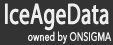
<style>
.page{position:relative;width:113px;height:45px;background:#333333}
.page>*{position:absolute;margin:0}
.t1{font:29.2px "MyriadPro-Regular";color:#efefef;font-weight:bold;scale:0.71 1}
.t2{font:11.7px "AvenirNext-Regular";color:#efefef;font-weight:bold;scale:0.71 1}
</style>
<div class="page">
<p class="t1" style="left:5px;top:3px;width:104px;height:28px">IceAgeData</p>
<p class="t2" style="left:28px;top:31px;width:84px;height:13px">owned by ONSIGMA</p>
</div>
